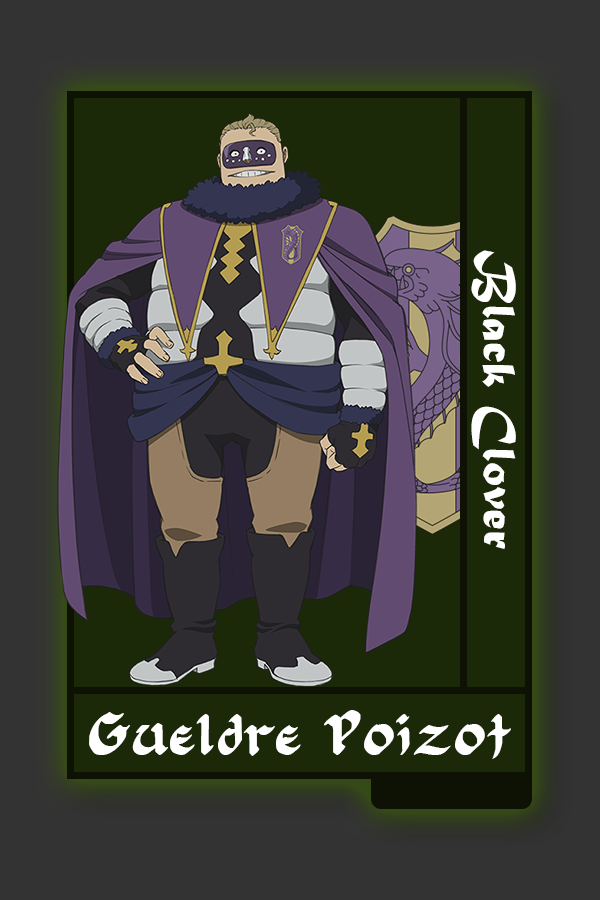
<style>
.page{position:relative;width:600px;height:900px;background:#333333}
.page>*{position:absolute;margin:0}
.t1{font:48.8px "MaturaMTScriptCapitals";color:#ffffff}
.t2{font:49.8px "FloranteatLaura";color:#ffffff}
</style>
<div class="page">
<p class="t1" style="left:471px;top:250px;width:45px;height:299px;rotate:90deg">Black Clover</p>
<p class="t2" style="left:89px;top:710px;width:422px;height:49px">Gueldre Poizot</p>
</div>
